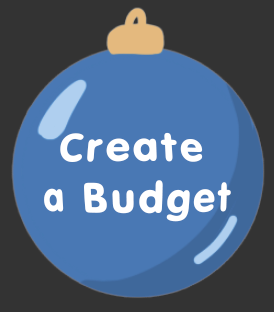
<style>
.page{position:relative;width:274px;height:312px;background:#333333}
.page>*{position:absolute;margin:0}
.t1{font:40.2px "NokiaSansS60-Bold";letter-spacing:0.08em;color:#ffffff}
</style>
<div class="page">
<p class="t1" style="left:44px;top:132px;width:187px;height:90px;text-align:center">Create <br>a Budget</p>
</div>
